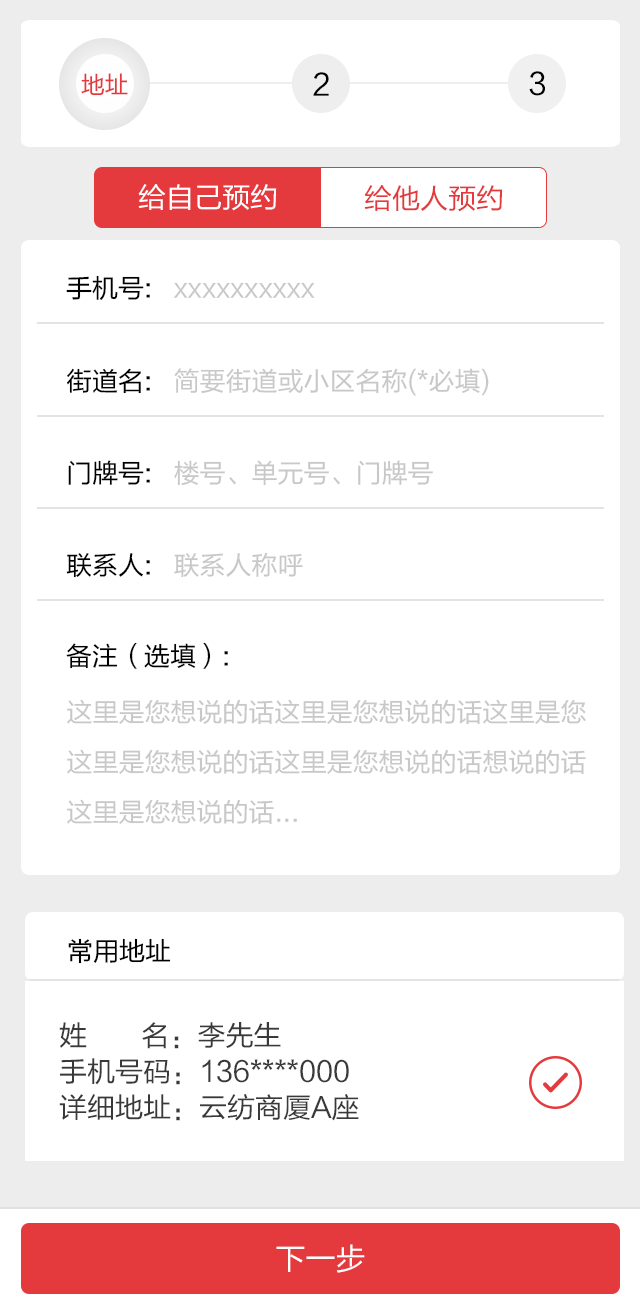
<style>
.page{position:relative;width:640px;height:1307px;background:#ffffff}
.page>*{position:absolute;margin:0}
.t1{font:24px "FZLTHJW--GB1-0";color:#e43a3d}
.t2{font:30px "FZLTHJW--GB1-0";color:#000000}
.t3{font:30px "FZLTHJW--GB1-0";color:#010000}
.t4{font:28px "FZLTHJW--GB1-0";color:#ffffff}
.t5{font:28px "FZLTHJW--GB1-0";color:#e43a3d}
.t6{font:26px "FZLTHJW--GB1-0";color:#c8c8c8}
.t7{font:26px "FZLTHJW--GB1-0";color:#000000}
.t8{font:26px/50px "FZLTHJW--GB1-0";color:#c8c8c8}
.t9{font:28px/36px "FZLTHJW--GB1-0";color:#393939}
.t10{font:30px "FZLTHJW--GB1-0";color:#ffffff}
</style>
<div class="page">
<p class="t1" style="left:81px;top:73px;width:47px;height:23px">地址</p>
<p class="t2" style="left:313px;top:72px;width:16px;height:24px">2</p>
<p class="t3" style="left:529px;top:71px;width:16px;height:25px">3</p>
<p class="t4" style="left:138px;top:184px;width:139px;height:27px">给自己预约</p>
<p class="t5" style="left:364px;top:185px;width:139px;height:27px">给他人预约</p>
<p class="t6" style="left:66px;top:275px;width:249px;height:25px"><span class="t7">手机号:   </span>xxxxxxxxxx</p>
<p class="t6" style="left:67px;top:368px;width:422px;height:28px"><span class="t7">街道名:   </span>简要街道或小区名称(*必填)</p>
<p class="t6" style="left:68px;top:460px;width:365px;height:26px"><span class="t7">门牌号:   </span>楼号、单元号、门牌号</p>
<p class="t6" style="left:66px;top:552px;width:237px;height:26px"><span class="t7">联系人:   </span>联系人称呼</p>
<p class="t7" style="left:66px;top:642px;width:162px;height:27px">备注（选填）:</p>
<p class="t8" style="left:67px;top:699px;width:519px;height:126px">这里是您想说的话这里是您想说的话这里是您<br>这里是您想说的话这里是您想说的话想说的话<br>这里是您想说的话...</p>
<p class="t7" style="left:68px;top:938px;width:103px;height:26px">常用地址</p>
<p class="t9" style="left:59px;top:1022px;width:300px;height:99px">姓       名：李先生 <br>手机号码：136****000<br>详细地址：云纺商厦A座</p>
<p class="t10" style="left:276px;top:1244px;width:89px;height:29px">下一步</p>
</div>
